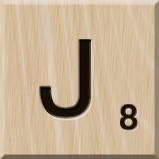
<style>
.page{position:relative;width:159px;height:159px}
.page>*{position:absolute;margin:0}
.t1{font:116px "MS-UIGothic";color:#180e01}
.t2{font:36px "MS-UIGothic";color:#1c1101;font-weight:bold;scale:1.1 1}
</style>
<div class="page">
<p class="t1" style="left:40px;top:40px;width:52px;height:79px">J</p>
<p class="t2" style="left:120px;top:104px;width:18px;height:27px">8</p>
</div>
